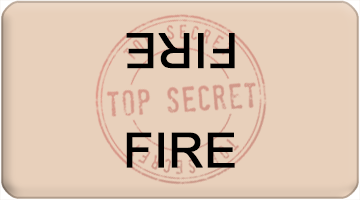
<style>
.page{position:relative;width:360px;height:200px;background:#e8d0bb}
.page>*{position:absolute;margin:0}
.t1{font:48px "ArialMT";color:#000000;font-weight:bold}
</style>
<div class="page">
<p class="t1" style="left:126px;top:33px;width:109px;height:36px;rotate:180deg">FIRE</p>
<p class="t1" style="left:126px;top:132px;width:109px;height:36px">FIRE</p>
</div>
